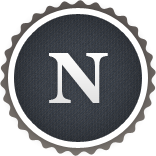
<style>
.page{position:relative;width:156px;height:156px;background:#ffffff}
.page>*{position:absolute;margin:0}
.t1{font:72px "Georgia-Bold";color:#ffffff}
</style>
<div class="page">
<p class="t1" style="left:49px;top:53px;width:59px;height:50px">N</p>
</div>
